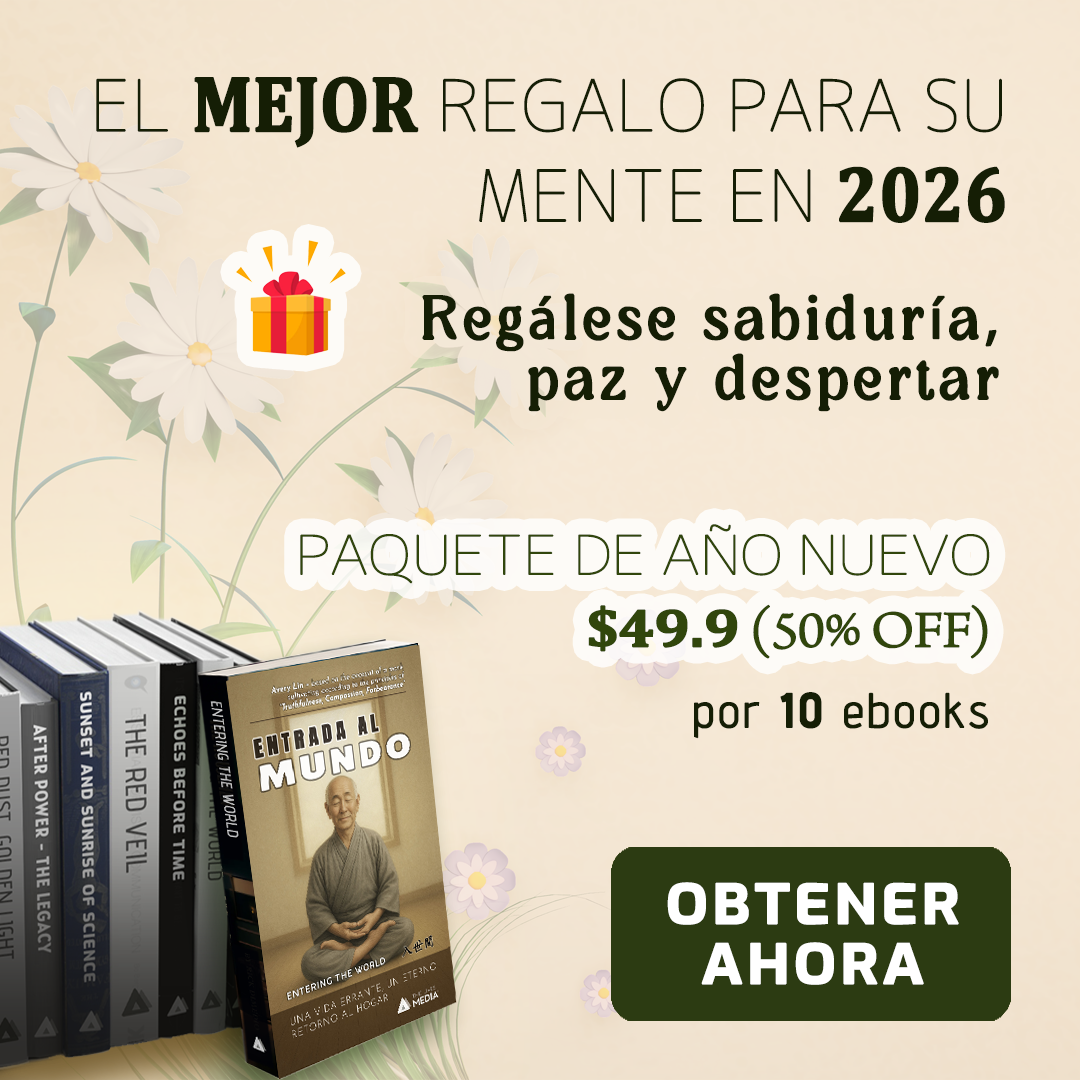
<style>
.page{position:relative;width:1080px;height:1080px}
.page>*{position:absolute;margin:0}
.t1{font:70.4px/90.2px "Chogokuboso-Gothic";letter-spacing:-0.01em;color:#151e05;font-weight:bold}
.t2{font:79.2px/90.2px "Cambria-Bold";letter-spacing:-0.01em;color:#151e05;font-weight:bold;scale:0.89 1}
.t3{font:60px/60px "AmadiBlurDemo-Regular";letter-spacing:0.075em;color:#151e05;font-weight:bold}
.t4{font:60px/60px "MyriadPro-Regular";letter-spacing:0.075em;color:#151e05;font-weight:bold}
.t5{font:54px/72px "Chogokuboso-Gothic";letter-spacing:-0.025em;color:#31460c;font-weight:bold;scale:1.11 1}
.t6{font:54px/72px "Cambria-Bold";letter-spacing:-0.025em;color:#31460c;font-weight:bold;scale:1.11 1}
.t7{font:54px/72px "ArnoPro-LightDisplay";letter-spacing:-0.025em;color:#31460c;font-weight:bold;scale:1.11 1}
.t8{font:48px "AdventPro-Regular";letter-spacing:0.05em;color:#151e05;font-weight:bold}
.t9{font:48px "AdventPro-Bold";letter-spacing:0.05em;color:#151e05;font-weight:bold}
.t10{font:54px/60px "Exo-Bold";letter-spacing:0.05em;color:#ffffff;font-weight:bold;scale:1.11 1}
</style>
<div class="page">
<p class="t1" style="left:96px;top:76px;width:909px;height:147px;text-align:right">EL <span class="t2">MEJOR</span> REGALO PARA SU MENTE EN <span class="t2">2026</span></p>
<p class="t3" style="left:422px;top:293px;width:577px;height:119px;text-align:right">Reg<span class="t4">á</span>lese sabidur<span class="t4">í</span>a<span class="t4">,</span> <br>paz y despertar</p>
<p class="t5" style="left:300px;top:524px;width:690px;height:135px;text-align:right">PAQUETE DE AÑO NUEVO <span class="t6">$49.9</span><span class="t7"> (50% OFF)</span></p>
<p class="t8" style="left:694px;top:692px;width:294px;height:47px">por <span class="t9">10</span> ebooks</p>
<p class="t10" style="left:667px;top:882px;width:292px;height:103px;text-align:center">OBTENER AHORA</p>
</div>
